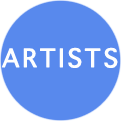
<style>
.page{position:relative;width:121px;height:121px;background:#5889ed}
.page>*{position:absolute;margin:0}
.t1{font:24px "Thonburi";letter-spacing:0.1em;color:#fefefe;font-weight:bold}
</style>
<div class="page">
<p class="t1" style="left:2px;top:47px;width:116px;height:21px">ARTISTS</p>
</div>
